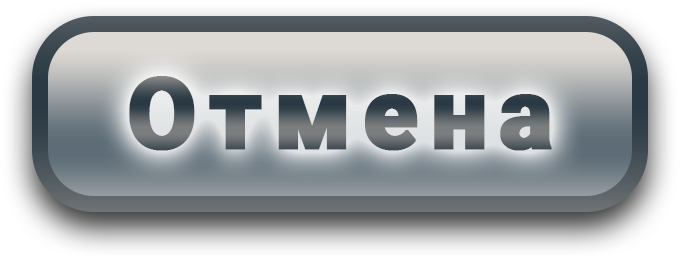
<style>
.page{position:relative;width:680px;height:260px}
.page>*{position:absolute;margin:0}
.t1{font:100px "Roboto-Black";letter-spacing:0.1em;font-weight:bold}
</style>
<div class="page">
<p class="t1" style="left:129px;top:76px;width:423px;height:75px">Отмена</p>
</div>
